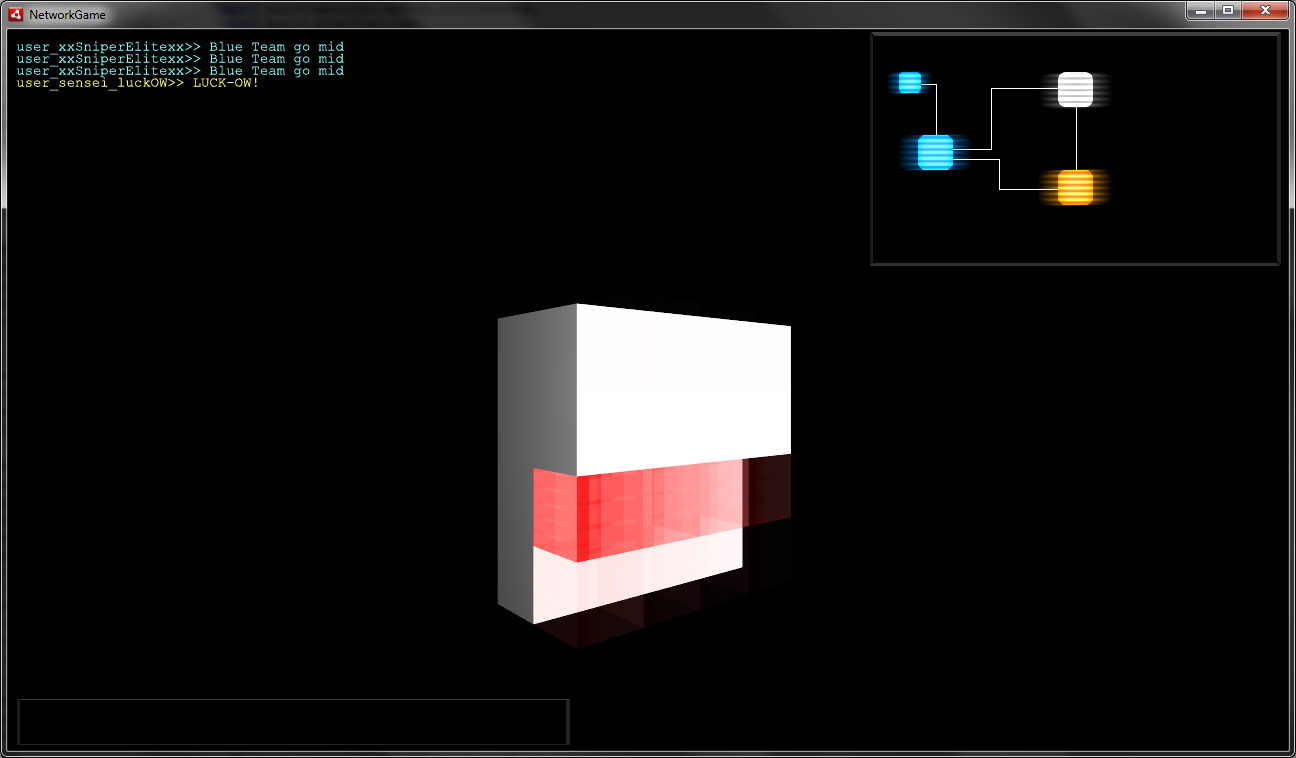
<style>
.page{position:relative;width:1296px;height:758px;background:#000000}
.page>*{position:absolute;margin:0}
.t1{font:14px "CourierNewPSMT";color:#85ffff}
.t2{font:14px "CourierNewPSMT";color:#ffff73}
</style>
<div class="page">
<p class="t1" style="left:16px;top:41px;width:328px;height:14px">user_xxSniperElitexx&gt;&gt; Blue Team go mid</p>
<p class="t1" style="left:16px;top:53px;width:328px;height:14px">user_xxSniperElitexx&gt;&gt; Blue Team go mid</p>
<p class="t1" style="left:16px;top:65px;width:328px;height:14px">user_xxSniperElitexx&gt;&gt; Blue Team go mid</p>
<p class="t2" style="left:16px;top:77px;width:241px;height:14px">user_sensei_luckOW&gt;&gt; LUCK-OW!</p>
</div>
